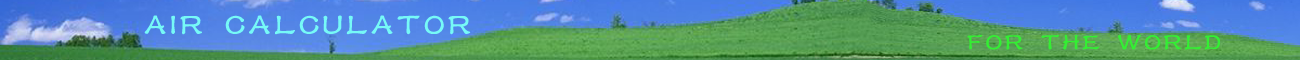
<style>
.page{position:relative;width:1300px;height:60px}
.page>*{position:absolute;margin:0}
.t1{font:30px "HYf2gs-GBpc-EUC-H";letter-spacing:0.1em;color:#76f9f7;text-transform:uppercase;font-weight:bold}
.t2{font:24px "HYf2gs-GBpc-EUC-H";letter-spacing:0.1em;color:#33ef33;text-transform:uppercase;font-weight:bold}
</style>
<div class="page">
<p class="t1" style="left:144px;top:15px;width:327px;height:20px">AIR CALCULATOR</p>
<p class="t2" style="left:967px;top:34px;width:253px;height:16px">FOR THE WORLD</p>
</div>
